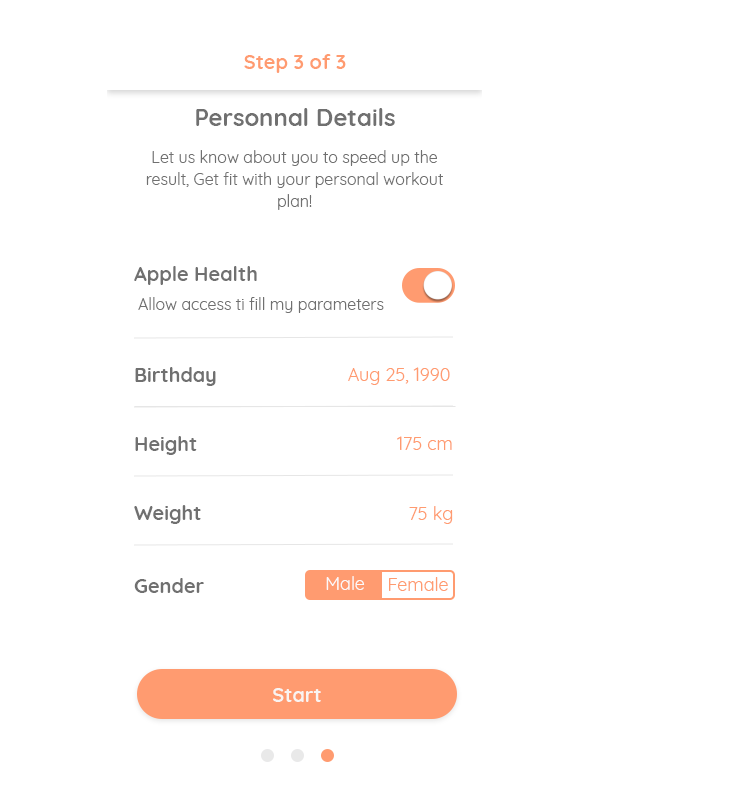
<style>
.page{position:relative;width:743px;height:812px;background:#ffffff}
.page>*{position:absolute;margin:0}
.t1{font:20px "Quicksand-Bold";color:#ff9b70}
.t2{font:24px "Quicksand-Bold";color:#707070}
.t3{font:16px/22px "Quicksand-Regular";color:#707070}
.t4{font:20px "Quicksand-Bold";color:#707070}
.t5{font:16px "Quicksand-Regular";color:#707070}
.t6{font:18px "Quicksand-Regular";color:#ff9b70}
.t7{font:18px "Quicksand-Regular";color:#fbf9f9}
.t8{font:20px "Quicksand-Bold";color:#f9f4f2}
</style>
<div class="page">
<p class="t1" style="left:244px;top:54px;width:102px;height:19px">Step 3 of 3</p>
<p class="t2" style="left:196px;top:108px;width:199px;height:18px">Personnal Details</p>
<p class="t3" style="left:146px;top:150px;width:297px;height:60px;text-align:center">Let us know about you to speed up the result, Get fit with your personal workout plan!</p>
<p class="t4" style="left:134px;top:266px;width:123px;height:19px">Apple Health</p>
<p class="t5" style="left:138px;top:297px;width:246px;height:16px">Allow access ti fill my parameters</p>
<p class="t4" style="left:135px;top:367px;width:81px;height:19px">Birthday</p>
<p class="t6" style="left:348px;top:367px;width:102px;height:18px">Aug 25, 1990</p>
<p class="t4" style="left:135px;top:436px;width:62px;height:19px">Height</p>
<p class="t6" style="left:397px;top:436px;width:55px;height:14px">175 cm</p>
<p class="t4" style="left:134px;top:505px;width:67px;height:19px">Weight</p>
<p class="t6" style="left:409px;top:506px;width:44px;height:18px">75 kg</p>
<p class="t4" style="left:134px;top:578px;width:70px;height:15px">Gender</p>
<p class="t7" style="left:326px;top:576px;width:39px;height:14px">Male</p>
<p class="t6" style="left:389px;top:577px;width:59px;height:14px">Female</p>
<p class="t8" style="left:273px;top:688px;width:48px;height:14px">Start</p>
</div>
